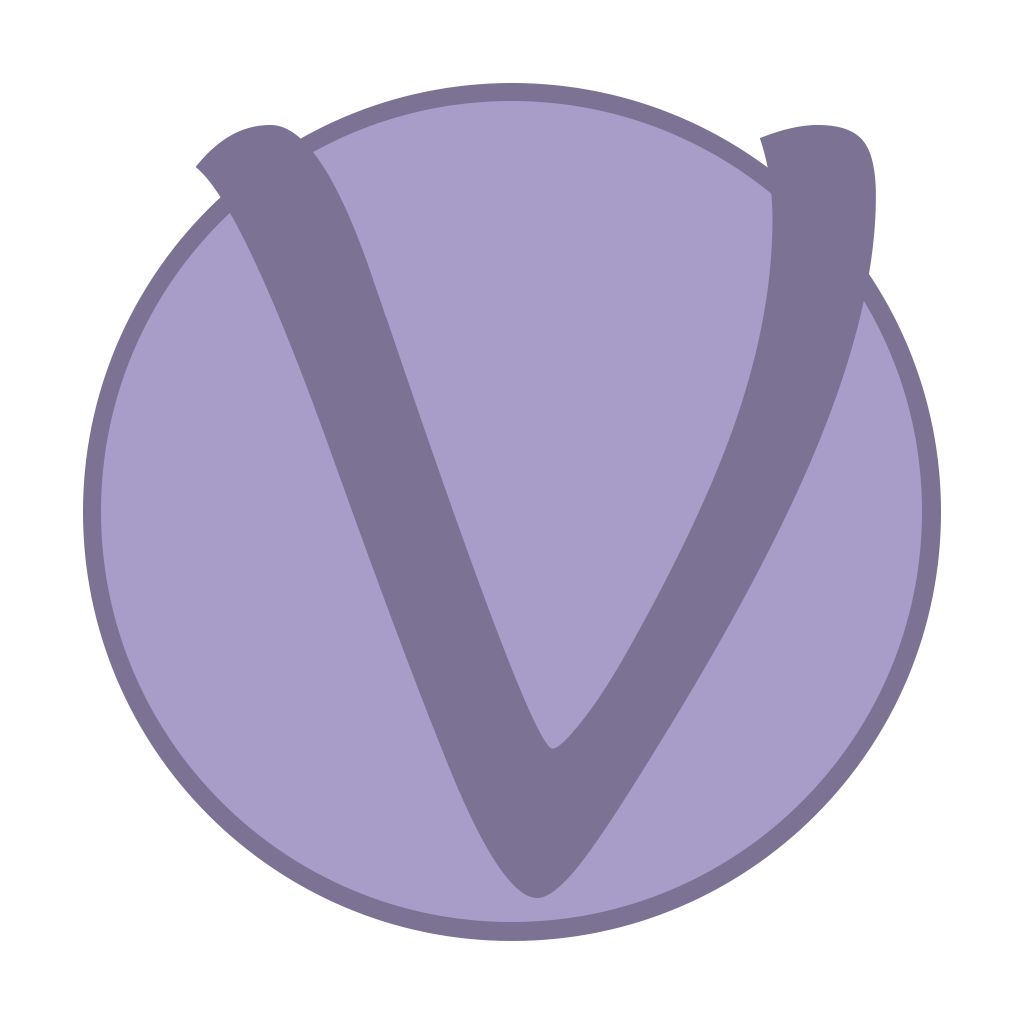
<style>
.page{position:relative;width:1024px;height:1024px;background:#ffffff}
.page>*{position:absolute;margin:0}
.t1{font:1075px "MaiandraGD-Regular";color:#7b7294}
</style>
<div class="page">
<p class="t1" style="left:195px;top:125px;width:681px;height:773px">V</p>
</div>
